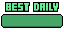
<style>
.page{position:relative;width:64px;height:32px;background:#46a668}
.page>*{position:absolute;margin:0}
.t1{font:10px "04b19";color:#64ee95}
</style>
<div class="page">
<p class="t1" style="left:6px;top:3px;width:52px;height:8px">BEST DAILY</p>
</div>
